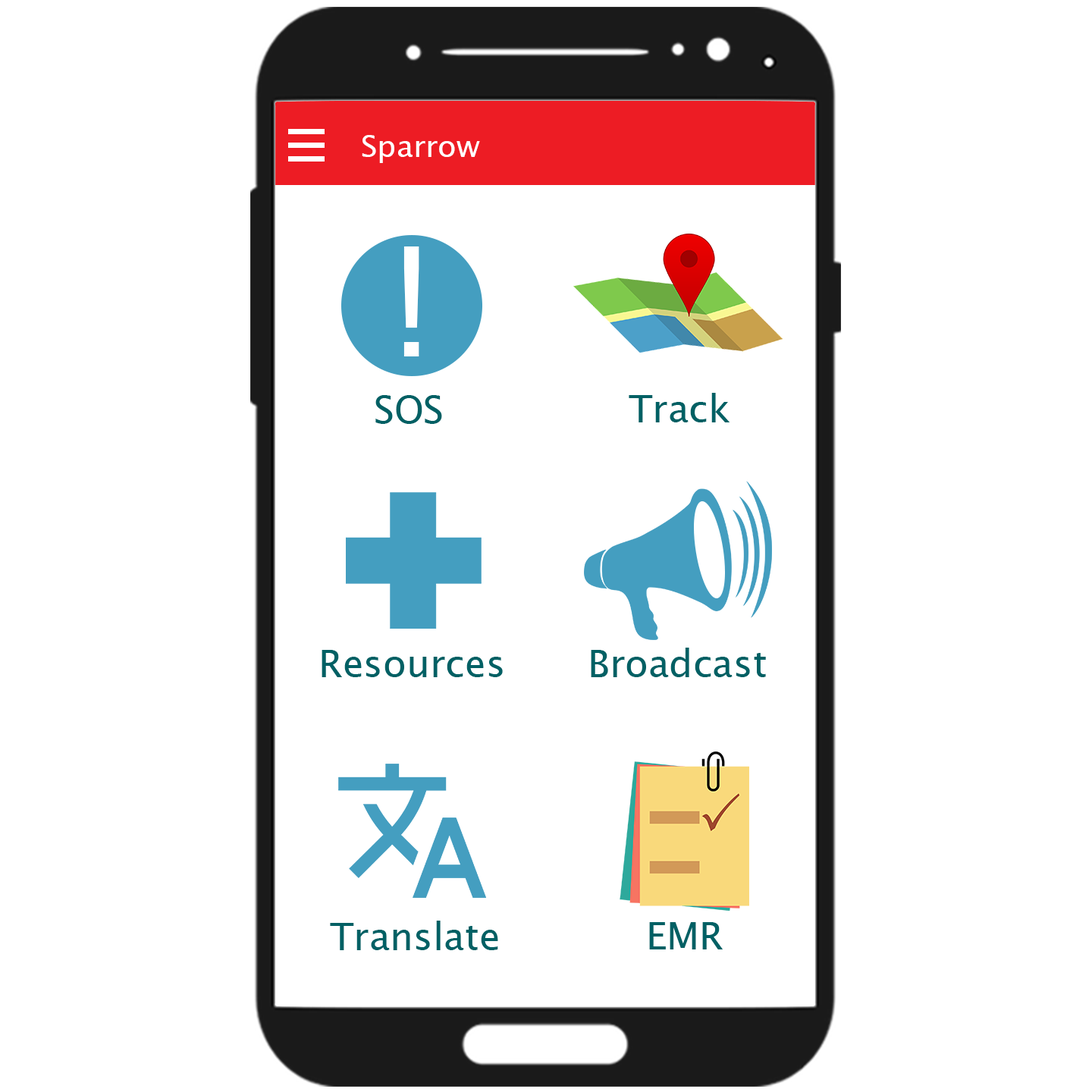
<style>
.page{position:relative;width:1092px;height:1092px;background:#ffffff}
.page>*{position:absolute;margin:0}
.t1{font:30.3px "LucidaSansUnicode";color:#ffffff}
.t2{font:151.7px "LucidaSansUnicode";color:#ffffff}
.t3{font:37.9px "LucidaSansUnicode";color:#006064}
</style>
<div class="page">
<p class="t1" style="left:362px;top:135px;width:118px;height:28px">Sparrow</p>
<p class="t2" style="left:403px;top:246px;width:16px;height:110px">!</p>
<p class="t3" style="left:375px;top:395px;width:67px;height:29px">SOS</p>
<p class="t3" style="left:629px;top:393px;width:101px;height:29px">Track</p>
<p class="t3" style="left:322px;top:650px;width:181px;height:27px">Resources</p>
<p class="t3" style="left:591px;top:648px;width:175px;height:29px">Broadcast</p>
<p class="t3" style="left:330px;top:921px;width:168px;height:29px">Translate</p>
<p class="t3" style="left:649px;top:922px;width:74px;height:27px">EMR</p>
</div>
